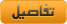
<style>
.page{position:relative;width:67px;height:24px}
.page>*{position:absolute;margin:0}
.t1{font:16px "BEsfehanBold";text-transform:uppercase}
</style>
<div class="page">
<p class="t1" style="left:12px;top:4px;width:43px;height:15px">تفاصيل</p>
</div>
